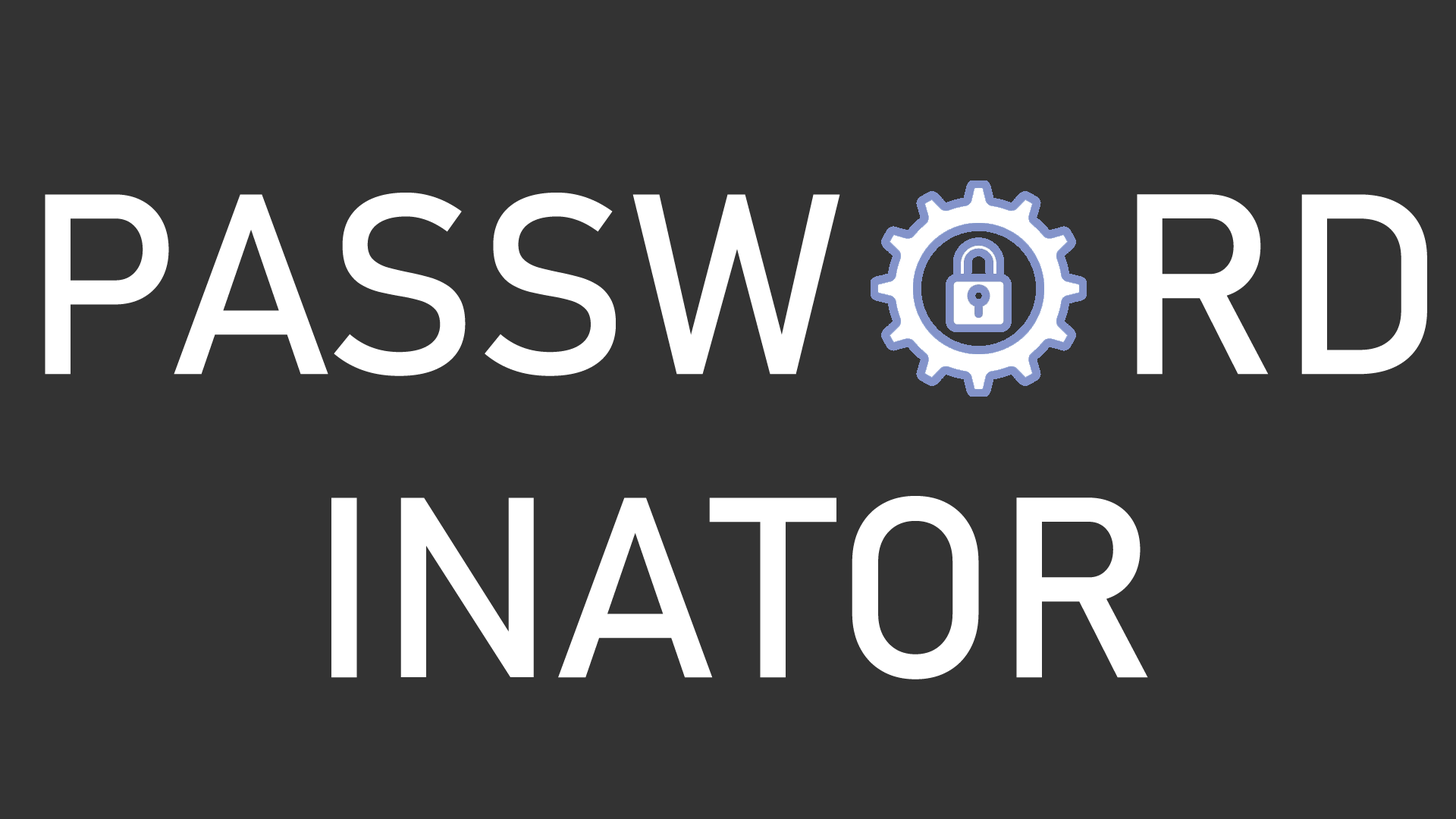
<style>
.page{position:relative;width:1456px;height:819px;background:#333333}
.page>*{position:absolute;margin:0}
.t1{font:252.8px "Bahnschrift";color:#ffffff}
</style>
<div class="page">
<p class="t1" style="left:45px;top:193px;width:1382px;height:486px;text-align:center">PASSW    RD<br>INATOR</p>
</div>
